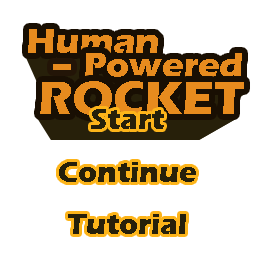
<style>
.page{position:relative;width:256px;height:256px;background:#ffffff}
.page>*{position:absolute;margin:0}
.t1{font:48px "ErasITC-Bold";color:#e78b1e}
.t2{font:30px "ErasITC-Bold";color:#26200a}
</style>
<div class="page">
<p class="t1" style="left:40px;top:81px;width:204px;height:34px">ROCKET</p>
<p class="t2" style="left:59px;top:109px;width:137px;height:125px;text-align:center">Start<br>Continue<br>Tutorial<br>Con</p>
</div>
